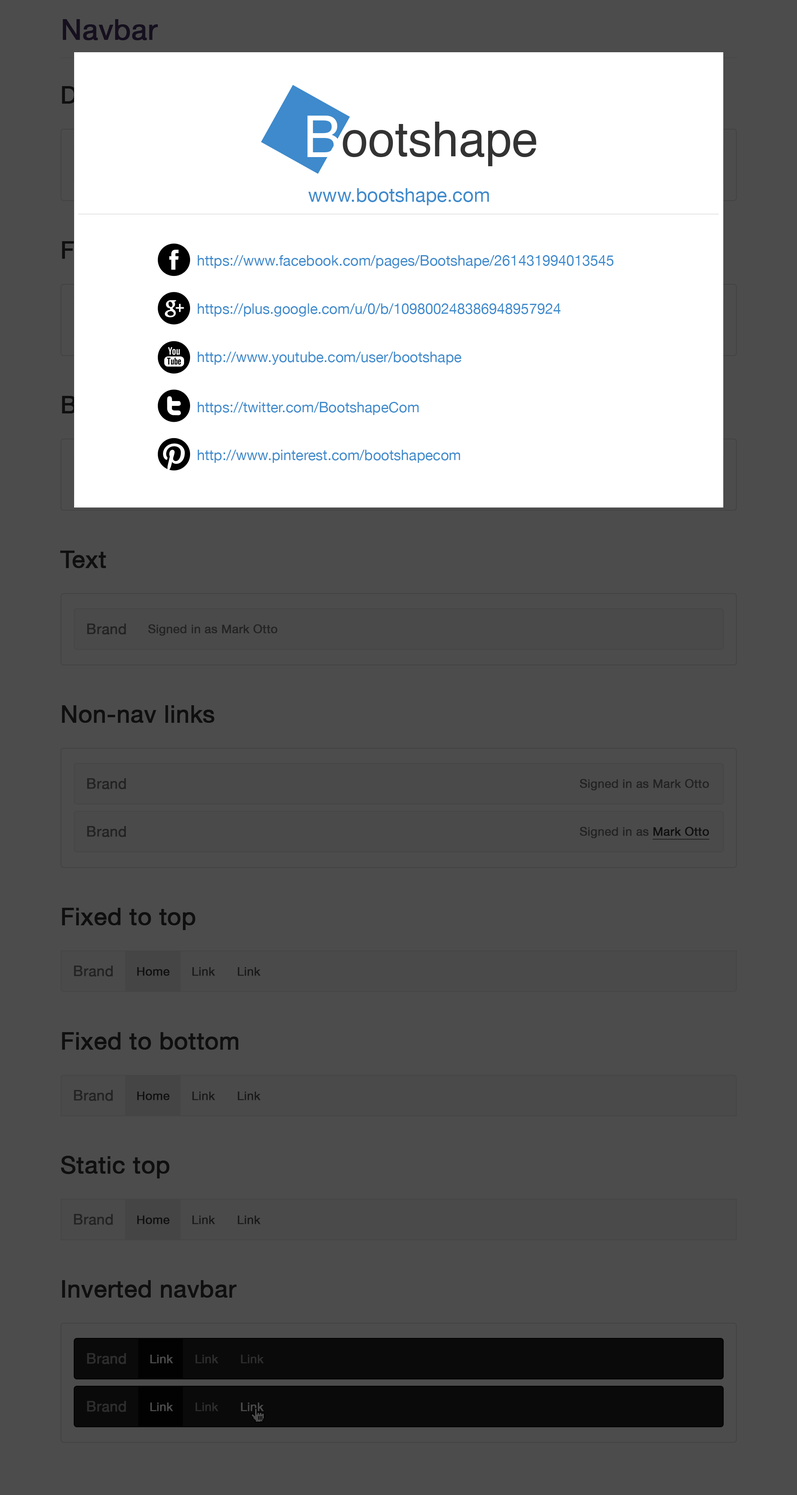
<style>
.page{position:relative;width:797px;height:1495px;background:#4c4c4c}
.page>*{position:absolute;margin:0}
.t1{font:28.7px "HelveticaNeue";color:#150f1e;font-weight:bold}
.t2{font:19.1px "HelveticaNeue";color:#3e8acc}
.t3{font:14.4px "HelveticaNeue";color:#3e8acc}
.t4{font:23.9px "HelveticaNeue";color:#0f0f0f;font-weight:bold}
.t5{font:14.4px "HelveticaNeue";color:#232323;font-weight:bold}
.t6{font:12px "HelveticaNeue";color:#232323;font-weight:bold}
.t7{font:12px "HelveticaNeue";color:#232323;font-weight:bold;text-decoration:underline}
.t8{font:12px "HelveticaNeue";color:#191919;font-weight:bold}
.t9{font:14.4px "HelveticaNeue";color:#2e2e2e;font-weight:bold}
.t10{font:12px "HelveticaNeue";font-weight:bold}
</style>
<div class="page">
<p class="t1" style="left:63px;top:19px;width:95px;height:21px">Navbar</p>
<p class="t2" style="left:308px;top:188px;width:181px;height:17px">www.bootshape.com</p>
<p class="t3" style="left:198px;top:255px;width:416px;height:13px">https://www.facebook.com/pages/Bootshape/261431994013545</p>
<p class="t3" style="left:198px;top:303px;width:363px;height:14px">https://plus.google.com/u/0/b/109800248386948957924</p>
<p class="t3" style="left:198px;top:352px;width:264px;height:13px">http://www.youtube.com/user/bootshape</p>
<p class="t3" style="left:198px;top:402px;width:221px;height:13px">https://twitter.com/BootshapeCom</p>
<p class="t3" style="left:198px;top:450px;width:263px;height:13px">http://www.pinterest.com/bootshapecom</p>
<p class="t4" style="left:60px;top:551px;width:46px;height:17px">Text</p>
<p class="t5" style="left:87px;top:624px;width:39px;height:11px">Brand</p>
<p class="t6" style="left:148px;top:624px;width:130px;height:12px">Signed in as Mark Otto</p>
<p class="t4" style="left:62px;top:705px;width:153px;height:18px">Non-nav links</p>
<p class="t5" style="left:87px;top:778px;width:39px;height:11px">Brand</p>
<p class="t6" style="left:580px;top:779px;width:129px;height:12px">Signed in as Mark Otto</p>
<p class="t5" style="left:87px;top:826px;width:39px;height:11px">Brand</p>
<p class="t6" style="left:580px;top:827px;width:130px;height:13px">Signed in as <span class="t7">Mark Otto</span></p>
<p class="t4" style="left:62px;top:908px;width:133px;height:22px">Fixed to top</p>
<p class="t5" style="left:74px;top:966px;width:39px;height:11px">Brand</p>
<p class="t8" style="left:137px;top:967px;width:124px;height:9px">Home      Link      Link</p>
<p class="t4" style="left:62px;top:1032px;width:176px;height:18px">Fixed to bottom</p>
<p class="t5" style="left:74px;top:1090px;width:39px;height:11px">Brand</p>
<p class="t8" style="left:137px;top:1092px;width:124px;height:9px">Home      Link      Link</p>
<p class="t4" style="left:61px;top:1156px;width:108px;height:23px">Static top</p>
<p class="t5" style="left:74px;top:1214px;width:39px;height:11px">Brand</p>
<p class="t8" style="left:137px;top:1216px;width:124px;height:9px">Home      Link      Link</p>
<p class="t4" style="left:62px;top:1280px;width:175px;height:18px">Inverted navbar</p>
<p class="t9" style="left:87px;top:1353px;width:39px;height:11px">Brand</p>
<p class="t10" style="left:150px;top:1355px;width:114px;height:9px">Link      Link      Link</p>
<p class="t9" style="left:87px;top:1401px;width:39px;height:11px">Brand</p>
<p class="t10" style="left:150px;top:1403px;width:114px;height:9px">Link      Link      Link</p>
</div>
